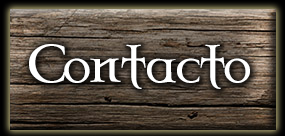
<style>
.page{position:relative;width:285px;height:136px}
.page>*{position:absolute;margin:0}
.t1{font:46.8px "CelticGaramondthe2nd";letter-spacing:-0.02em;color:#ffffff;scale:0.93 1}
</style>
<div class="page">
<p class="t1" style="left:29px;top:44px;width:221px;height:45px">Contacto</p>
</div>
